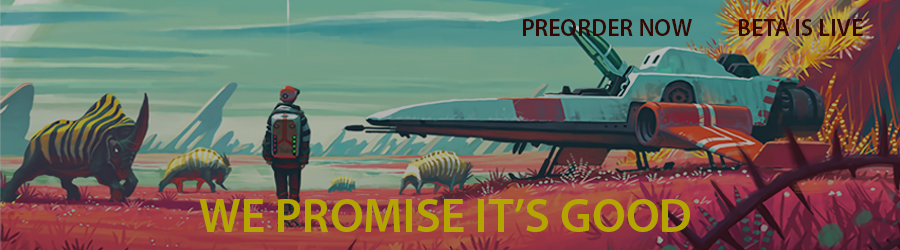
<style>
.page{position:relative;width:900px;height:250px}
.page>*{position:absolute;margin:0}
.t1{font:24px "MyriadPro-Semibold";color:#330803}
.t2{font:48px "MyriadPro-Semibold";color:#b3a400}
</style>
<div class="page">
<p class="t1" style="left:523px;top:19px;width:169px;height:17px">PREORDER NOW</p>
<p class="t1" style="left:739px;top:19px;width:124px;height:17px">BETA IS LIVE</p>
<p class="t2" style="left:199px;top:199px;width:491px;height:33px">WE PROMISE IT’S GOOD</p>
</div>
